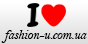
<style>
.page{position:relative;width:88px;height:44px}
.page>*{position:absolute;margin:0}
.t1{font:14px "BellMTItalic";letter-spacing:-0.03em;color:#000000}
</style>
<div class="page">
<p class="t1" style="left:1px;top:30px;width:86px;height:13px">fashion-u.com.ua</p>
</div>
